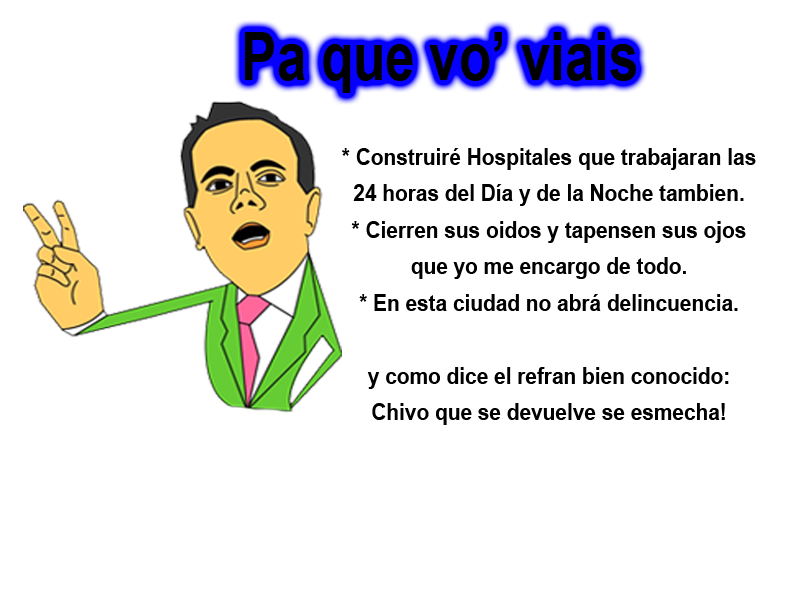
<style>
.page{position:relative;width:800px;height:600px;background:#ffffff}
.page>*{position:absolute;margin:0}
.t1{font:67.3px "Arial-BoldMT";color:#000000;scale:0.79 1}
.t2{font:22.6px/36.5px "Arial-BoldMT";color:#000000;scale:0.92 1}
</style>
<div class="page">
<p class="t1" style="left:244px;top:32px;width:392px;height:61px">Pa que vo’ viais</p>
<p class="t2" style="left:342px;top:148px;width:414px;height:277px;text-align:center">* Construiré Hospitales que trabajaran las<br>24 horas del Día y de la Noche tambien.<br>* Cierren sus oidos y tapensen sus ojos <br>que yo me encargo de todo.<br>* En esta ciudad no abrá delincuencia.<br><br>y como dice el refran bien conocido:<br>Chivo que se devuelve se esmecha!</p>
</div>
